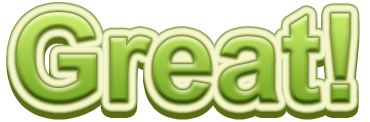
<style>
.page{position:relative;width:370px;height:122px;background:#ffffff}
.page>*{position:absolute;margin:0}
.t1{font:123.2px "Arial-BoldMT";scale:0.96 1}
</style>
<div class="page">
<p class="t1" style="left:16px;top:12px;width:334px;height:92px">Great!</p>
<p class="t1" style="left:16px;top:18px;width:334px;height:92px">Great!</p>
</div>
